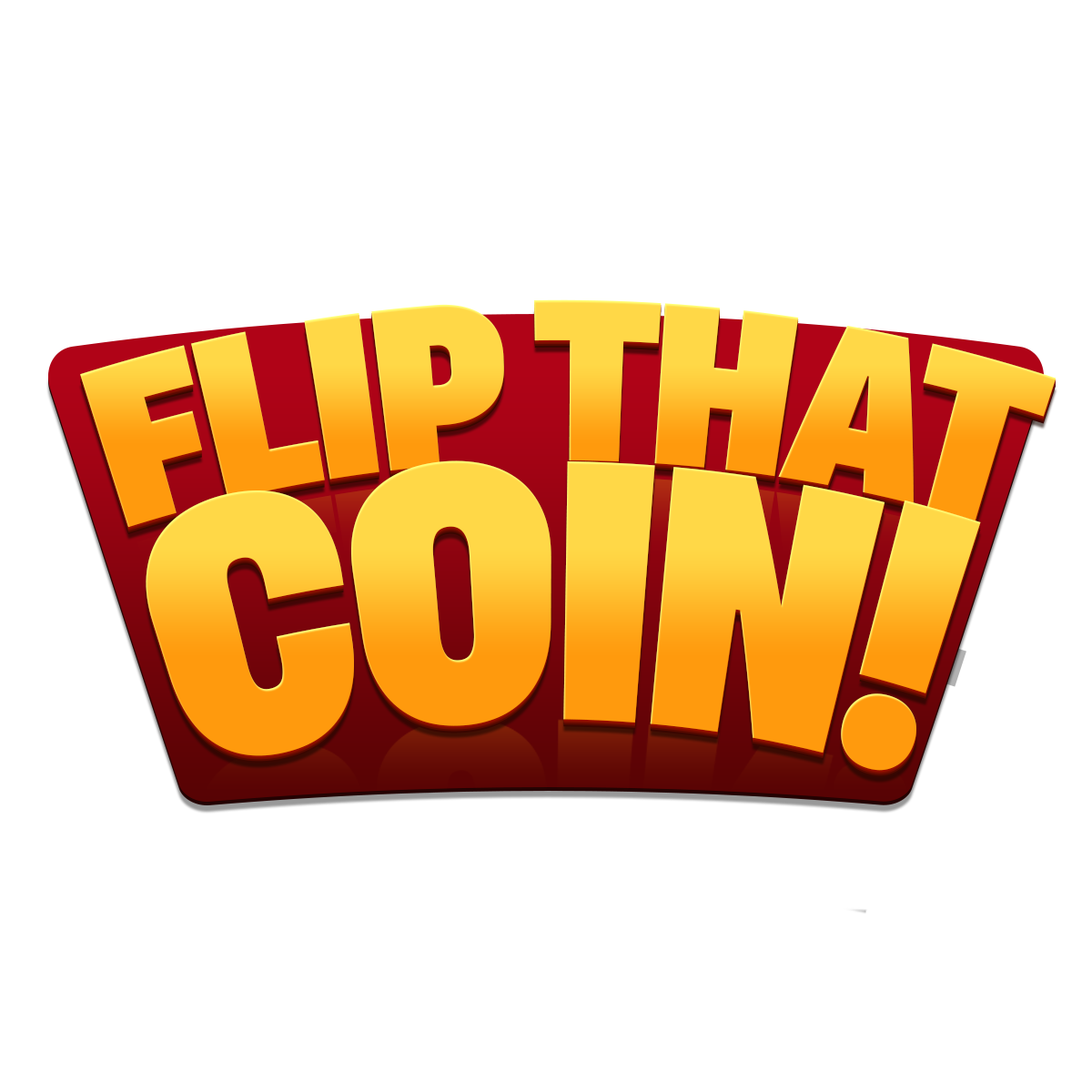
<style>
.page{position:relative;width:1092px;height:1092px;background:#ffffff}
.page>*{position:absolute;margin:0}
.t1{font:214.5px "AsketCondensed-ExtraBold";letter-spacing:-0.05em;text-transform:uppercase}
.t2{font:343.7px "AsketCondensed-ExtraBold";letter-spacing:-0.05em;text-transform:uppercase;scale:0.83 1}
</style>
<div class="page">
<p class="t1" style="left:80px;top:299px;width:976px;height:229px">FLIP THAT</p>
<p class="t2" style="left:146px;top:460px;width:835px;height:311px">COIN!</p>
</div>
